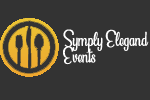
<style>
.page{position:relative;width:150px;height:100px;background:#333333}
.page>*{position:absolute;margin:0}
.t1{font:13.9px "BeautifulPeoplePersonalUse";color:#ffffff}
</style>
<div class="page">
<p class="t1" style="left:63px;top:29px;width:86px;height:36px">Symply Elegand<br>Events</p>
</div>
